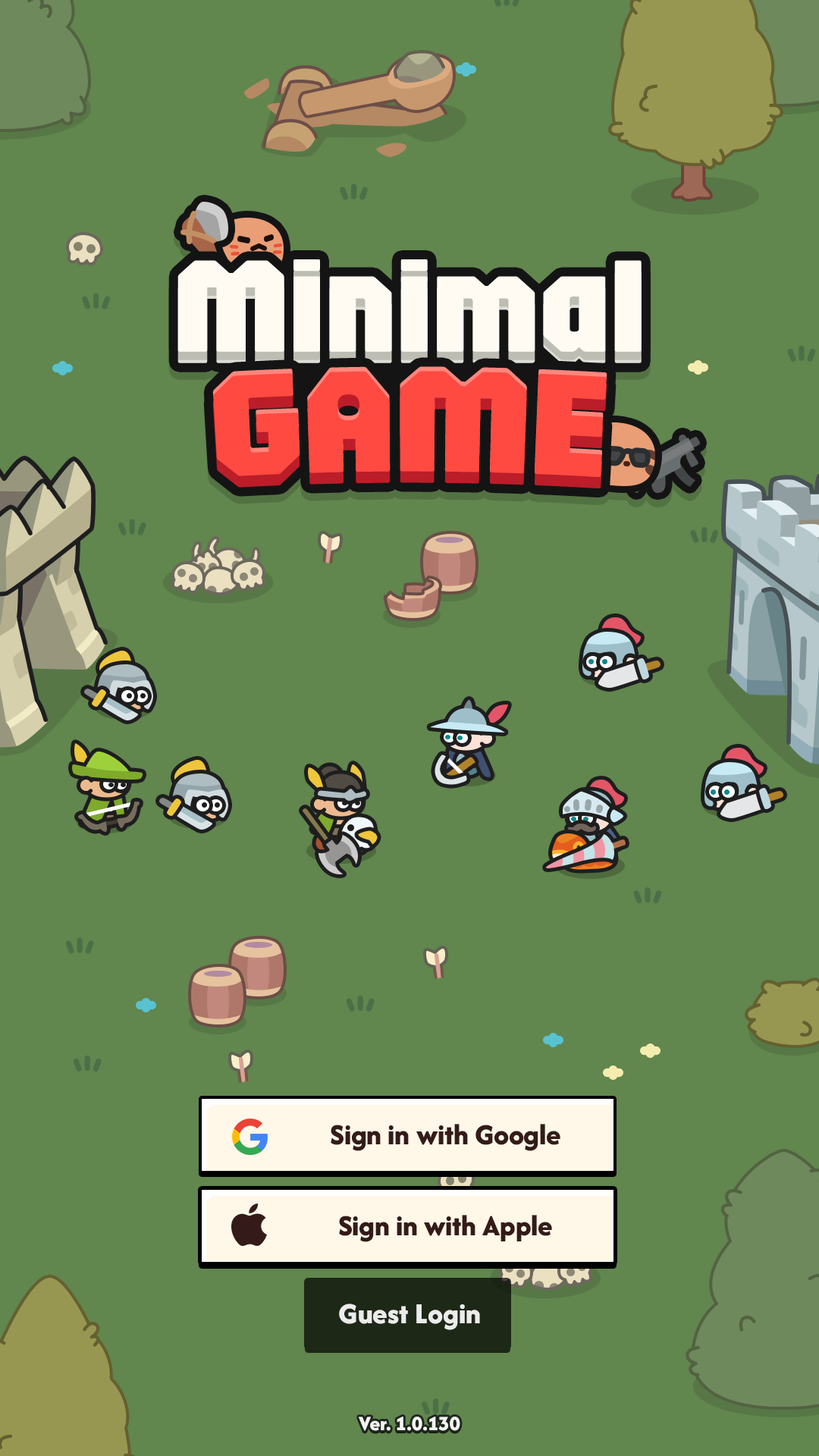
<style>
.page{position:relative;width:819px;height:1456px;background:#61864e}
.page>*{position:absolute;margin:0}
.t1{font:136.5px "Jaro48pt-Regular";color:#fffbf3;scale:1.11 1}
.t2{font:157px "Jaro48pt-Regular";color:#ff4a41;text-transform:uppercase;scale:1.11 1}
.t3{font:30.3px "AfacadFlux-ExtraBold";color:#341b19}
.t4{font:30.3px "AfacadFlux-ExtraBold";letter-spacing:0.01em;color:#ececec}
.t5{font:21.2px "AfacadFlux-ExtraBold";color:#ffffff}
</style>
<div class="page">
<p class="t1" style="left:177px;top:259px;width:465px;height:93px">Minimal</p>
<p class="t1" style="left:177px;top:271px;width:465px;height:92px">Minimal</p>
<p class="t2" style="left:212px;top:378px;width:395px;height:110px">Game</p>
<p class="t2" style="left:212px;top:366px;width:395px;height:111px">Game</p>
<p class="t3" style="left:331px;top:1124px;width:229px;height:27px">Sign in with Google</p>
<p class="t3" style="left:339px;top:1215px;width:213px;height:27px">Sign in with Apple</p>
<p class="t4" style="left:339px;top:1304px;width:141px;height:26px">Guest Login</p>
<p class="t5" style="left:359px;top:1417px;width:101px;height:14px;opacity:0.9">Ver. 1.0.130</p>
</div>
